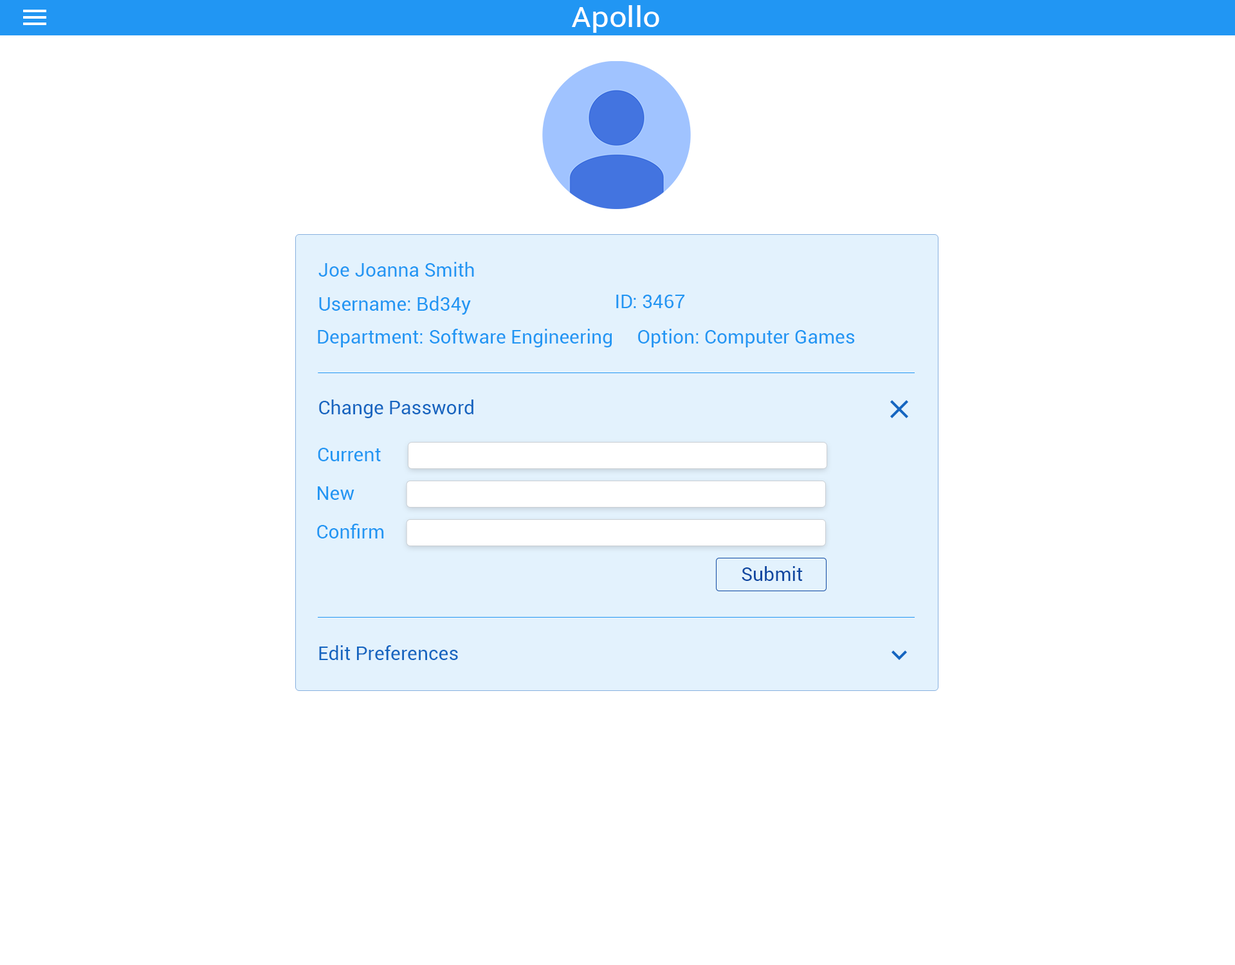
<style>
.page{position:relative;width:1235px;height:965px;background:#ffffff}
.page>*{position:absolute;margin:0}
.t1{font:29px "Roboto-Regular";color:#ffffff;scale:1.08 1}
.t2{font:19.3px "Roboto-Regular";color:#2196f3}
.t3{font:19.1px "Roboto-Regular";color:#2196f3}
.t4{font:19.3px "Roboto-Regular";color:#1565c0}
.t5{font:19.3px "Roboto-Regular";color:#0d47a1}
</style>
<div class="page">
<p class="t1" style="left:572px;top:5px;width:88px;height:28px">Apollo</p>
<p class="t2" style="left:319px;top:262px;width:155px;height:15px">Joe Joanna Smith</p>
<p class="t2" style="left:319px;top:296px;width:152px;height:19px">Username: Bd34y</p>
<p class="t2" style="left:616px;top:295px;width:69px;height:13px">ID: 3467</p>
<p class="t3" style="left:318px;top:329px;width:294px;height:18px">Department: Software Engineering</p>
<p class="t3" style="left:638px;top:329px;width:217px;height:18px">Option: Computer Games</p>
<p class="t4" style="left:319px;top:400px;width:155px;height:18px">Change Password</p>
<p class="t2" style="left:318px;top:448px;width:63px;height:13px">Current</p>
<p class="t2" style="left:318px;top:486px;width:37px;height:14px">New</p>
<p class="t2" style="left:317px;top:524px;width:67px;height:15px">Confirm</p>
<p class="t5" style="left:742px;top:566px;width:61px;height:15px">Submit</p>
<p class="t4" style="left:319px;top:645px;width:139px;height:15px">Edit Preferences</p>
</div>
